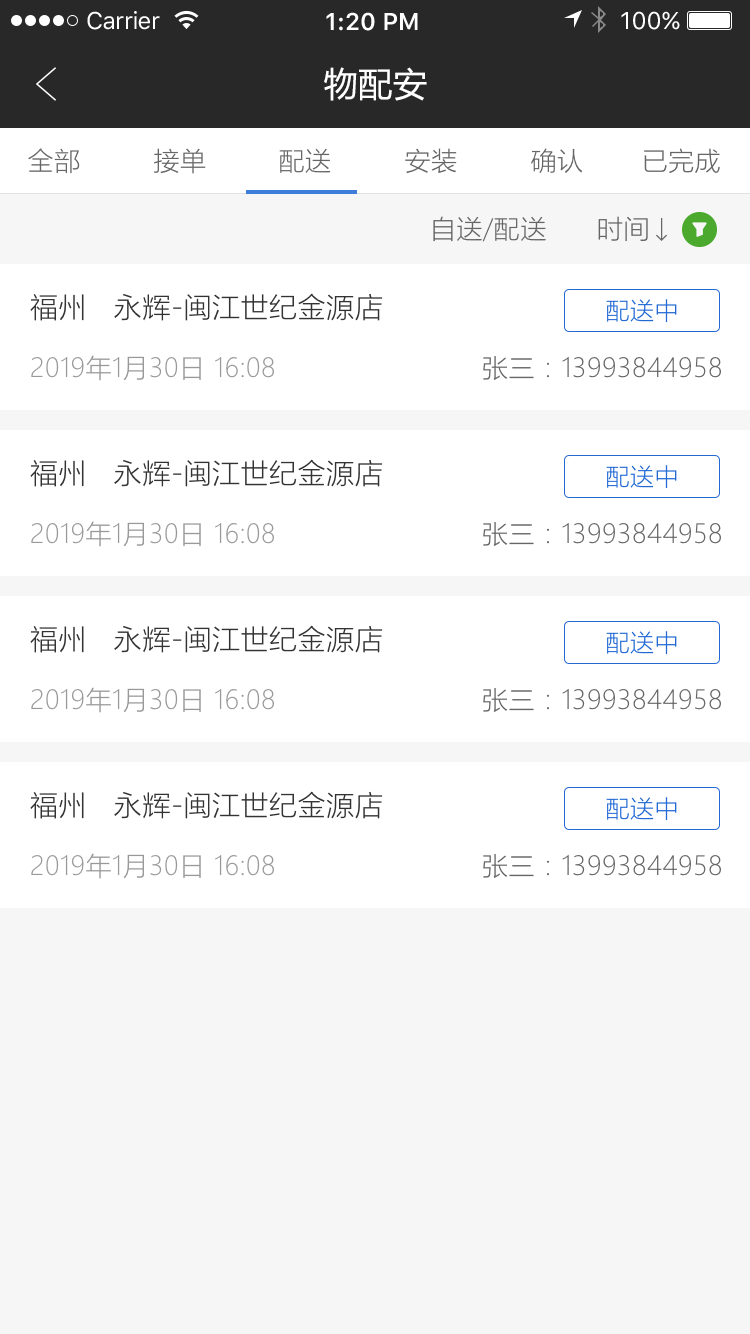
<style>
.page{position:relative;width:750px;height:1334px;background:#ffffff}
.page>*{position:absolute;margin:0}
.t1{font:24px "SFUIText-Regular";letter-spacing:-0.025em;color:#ffffff}
.t2{font:24px "SFUIText-Semibold";color:#ffffff}
.t3{font:24px "SFUIText-Regular";color:#ffffff}
.t4{font:34px "MicrosoftYaHei";letter-spacing:0.02em;color:#ffffff}
.t5{font:26px "MicrosoftYaHeiLight";letter-spacing:0.02em;color:#666666}
.t6{font:28px "MicrosoftYaHeiLight";letter-spacing:0.02em;color:#333333}
.t7{font:24px "MicrosoftYaHeiLight";letter-spacing:0.02em;color:#2269d4}
.t8{font:26px "MicrosoftYaHeiLight";letter-spacing:0.02em;color:#999999}
</style>
<div class="page">
<p class="t1" style="left:87px;top:11px;width:73px;height:19px">Carrier</p>
<p class="t2" style="left:326px;top:12px;width:92px;height:19px">1:20 PM</p>
<p class="t3" style="left:621px;top:11px;width:59px;height:19px">100%</p>
<p class="t4" style="left:324px;top:67px;width:103px;height:34px">物配安</p>
<p class="t5" style="left:28px;top:148px;width:52px;height:26px">全部</p>
<p class="t5" style="left:154px;top:148px;width:52px;height:26px">接单</p>
<p class="t5" style="left:279px;top:148px;width:52px;height:25px">配送</p>
<p class="t5" style="left:405px;top:148px;width:52px;height:26px">安装</p>
<p class="t5" style="left:531px;top:148px;width:52px;height:25px">确认</p>
<p class="t5" style="left:644px;top:148px;width:76px;height:25px">已完成</p>
<p class="t5" style="left:433px;top:216px;width:113px;height:26px">自送/配送</p>
<p class="t5" style="left:598px;top:216px;width:50px;height:26px">时间</p>
<p class="t6" style="left:30px;top:293px;width:353px;height:28px">福州   永辉-闽江世纪金源店</p>
<p class="t7" style="left:606px;top:299px;width:71px;height:24px">配送中</p>
<p class="t8" style="left:31px;top:355px;width:243px;height:26px">2019年1月30日 16:08</p>
<p class="t5" style="left:483px;top:356px;width:238px;height:24px">张三：13993844958</p>
<p class="t6" style="left:30px;top:459px;width:353px;height:28px">福州   永辉-闽江世纪金源店</p>
<p class="t7" style="left:606px;top:465px;width:71px;height:24px">配送中</p>
<p class="t8" style="left:31px;top:521px;width:243px;height:26px">2019年1月30日 16:08</p>
<p class="t5" style="left:483px;top:522px;width:238px;height:24px">张三：13993844958</p>
<p class="t6" style="left:30px;top:625px;width:353px;height:28px">福州   永辉-闽江世纪金源店</p>
<p class="t7" style="left:606px;top:631px;width:71px;height:24px">配送中</p>
<p class="t8" style="left:31px;top:687px;width:243px;height:26px">2019年1月30日 16:08</p>
<p class="t5" style="left:483px;top:688px;width:238px;height:24px">张三：13993844958</p>
<p class="t6" style="left:30px;top:791px;width:353px;height:28px">福州   永辉-闽江世纪金源店</p>
<p class="t7" style="left:606px;top:797px;width:71px;height:24px">配送中</p>
<p class="t8" style="left:31px;top:853px;width:243px;height:26px">2019年1月30日 16:08</p>
<p class="t5" style="left:483px;top:854px;width:238px;height:24px">张三：13993844958</p>
</div>
